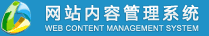
<style>
.page{position:relative;width:209px;height:36px;background:#2092c8}
.page>*{position:absolute;margin:0}
.t1{font:16px "-";letter-spacing:0.2em;color:#ffffff;font-weight:bold}
.t2{font:7.7px "ArialMT";color:#d9ebf0;font-weight:bold}
</style>
<div class="page">
<p class="t1" style="left:46px;top:4px;width:153px;height:17px">网站内容管理系统</p>
<p class="t2" style="left:45px;top:25px;width:154px;height:6px">WEB CONTENT MANAGEMENT SYSTEM</p>
</div>
